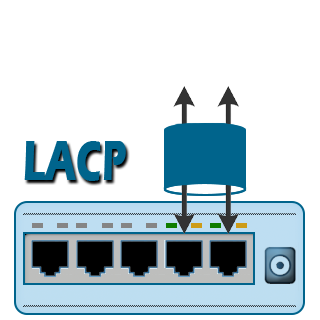
<style>
.page{position:relative;width:320px;height:320px;background:#ffffff}
.page>*{position:absolute;margin:0}
.t1{font:58.4px "ErasITC-Bold";color:#00648c;scale:0.65 1}
</style>
<div class="page">
<p class="t1" style="left:24px;top:141px;width:102px;height:40px">LACP</p>
</div>
